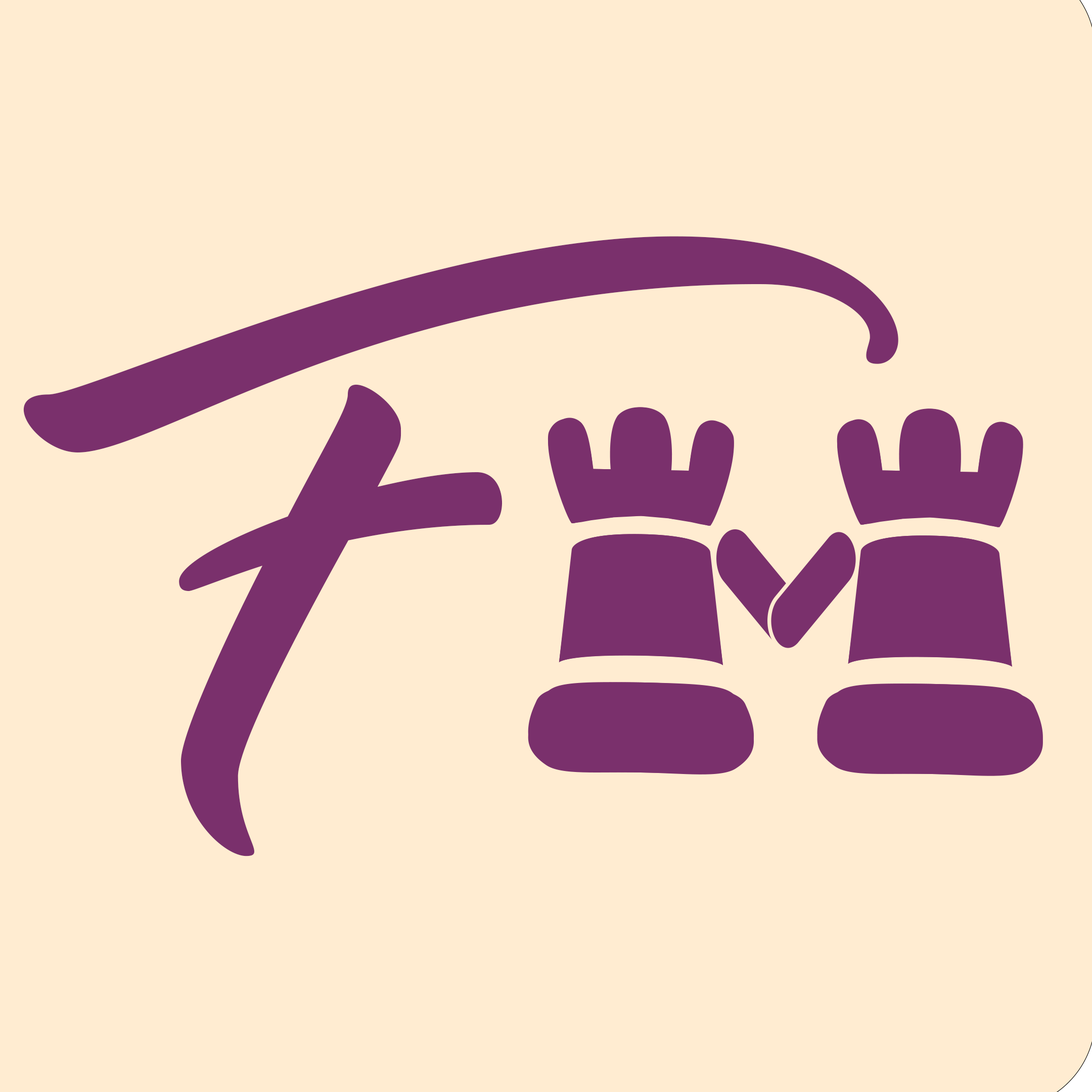
<style>
.page{position:relative;width:1092px;height:1092px;background:#ffecd1}
.page>*{position:absolute;margin:0}
.t1{font:487.1px "ThinkingOfBettyLight";color:#7a306c}
</style>
<div class="page">
<p class="t1" style="left:23px;top:236px;width:875px;height:620px">F</p>
</div>
